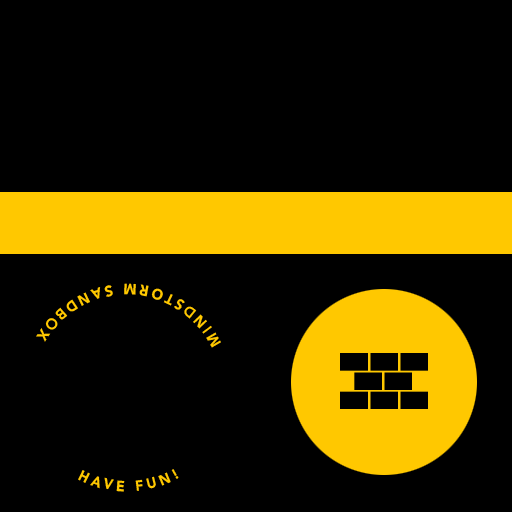
<style>
.page{position:relative;width:512px;height:512px;background:#000000}
.page>*{position:absolute;margin:0}
.t1{font:15px/31.2px "Avenir-Black";letter-spacing:0.28em;color:#ffc800;text-transform:uppercase;scale:0.93 1}
.t2{font:14.7px "Avenir-Black";letter-spacing:0.28em;color:#ffc800;text-transform:uppercase;scale:0.93 1}
</style>
<div class="page">
<p class="t1" style="left:36px;top:283px;width:185px;height:65px">MINDSTORM SANDBOX</p>
<p class="t2" style="left:78px;top:469px;width:101px;height:23px">HAVE FUN!</p>
</div>
